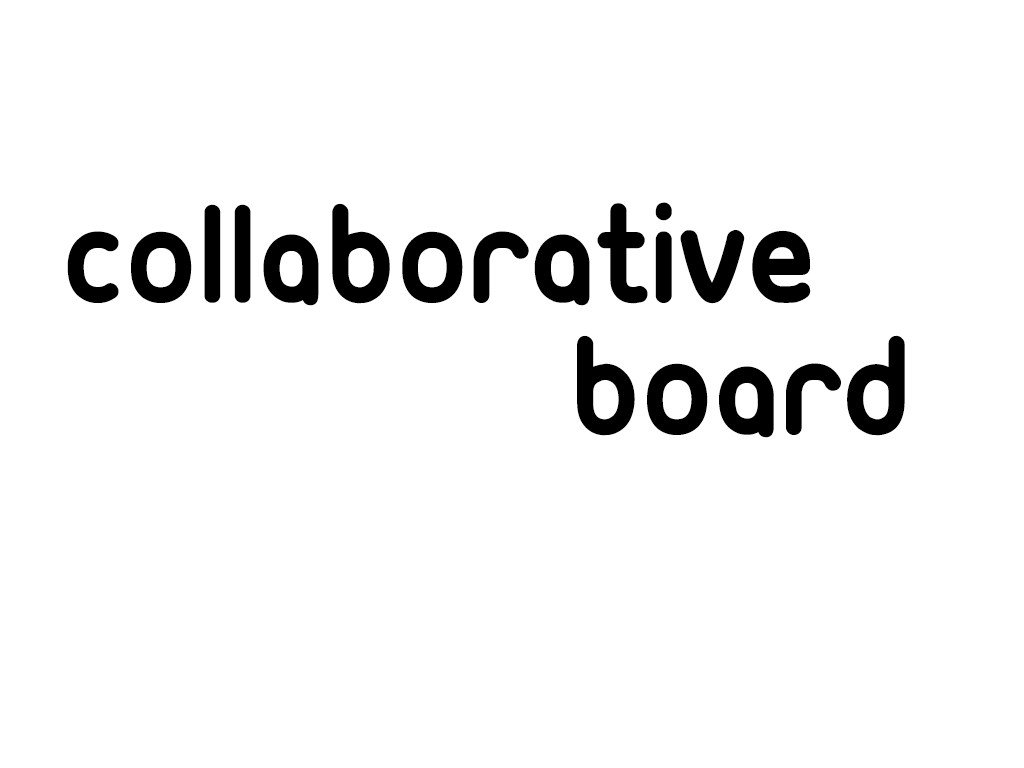
<style>
.page{position:relative;width:1024px;height:768px;background:#ffffff}
.page>*{position:absolute;margin:0}
.t1{font:150px "Ubuntu-Title";color:#000000}
</style>
<div class="page">
<p class="t1" style="left:67px;top:202px;width:744px;height:104px">COLLABORATIVE</p>
<p class="t1" style="left:577px;top:335px;width:328px;height:103px">BOARD</p>
</div>
